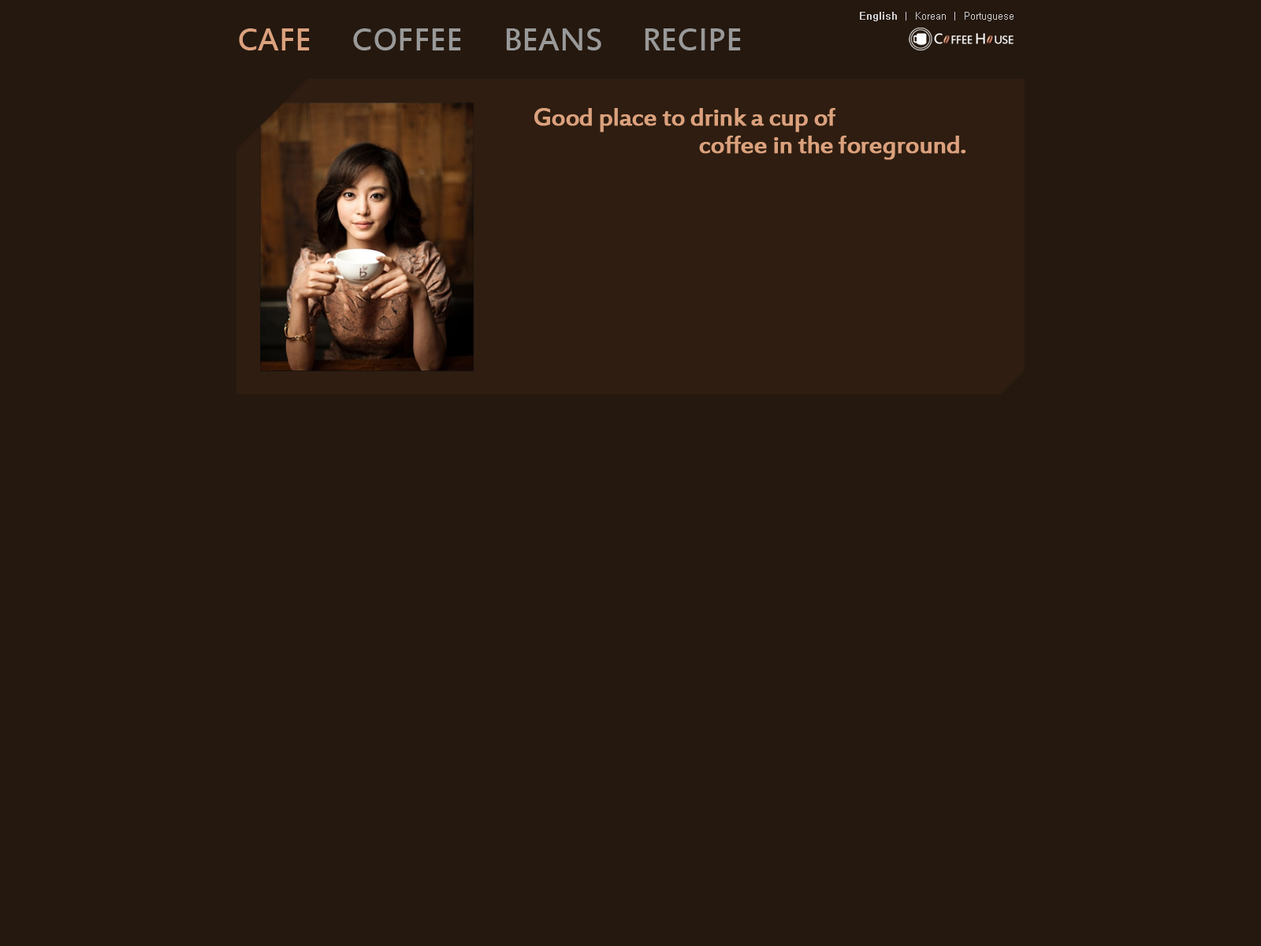
<style>
.page{position:relative;width:1261px;height:946px;background:#25180f}
.page>*{position:absolute;margin:0}
.t1{font:9.5px "Gulim";color:#cfcfcf}
.t2{font:9.5px "Gulim";color:#cfcfcf;font-weight:bold}
.t3{font:35.5px "EstrangeloEdessa";color:#dba17d}
.t4{font:35.5px "EstrangeloEdessa";color:#999999}
.t5{font:27.6px/27.6px "EstrangeloEdessa";letter-spacing:-0.04em;color:#dba17d;font-weight:bold}
</style>
<div class="page">
<p class="t1" style="left:860px;top:12px;width:153px;height:9px"><span class="t2">English</span>  |  Korean  |  Portuguese</p>
<p class="t3" style="left:239px;top:28px;width:71px;height:22px">CAFE</p>
<p class="t4" style="left:353px;top:28px;width:108px;height:22px">COFFEE</p>
<p class="t4" style="left:506px;top:28px;width:95px;height:22px">BEANS</p>
<p class="t4" style="left:645px;top:28px;width:96px;height:22px">RECIPE</p>
<p class="t5" style="left:534px;top:108px;width:432px;height:52px">Good place to drink a cup of <br>                               coffee in the foreground.</p>
</div>
